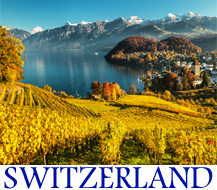
<style>
.page{position:relative;width:217px;height:190px}
.page>*{position:absolute;margin:0}
.t1{font:33.3px "FootlightMTLight";color:#00129d}
</style>
<div class="page">
<p class="t1" style="left:4px;top:166px;width:209px;height:23px">SWITZERLAND</p>
</div>
